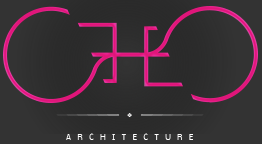
<style>
.page{position:relative;width:262px;height:144px;background:#333333}
.page>*{position:absolute;margin:0}
.t1{font:7.5px "Nobile-Regular";letter-spacing:0.9em;color:#ffffff;scale:0.97 1}
</style>
<div class="page">
<p class="t1" style="left:66px;top:133px;width:127px;height:7px">ARCHITECTURE</p>
</div>
